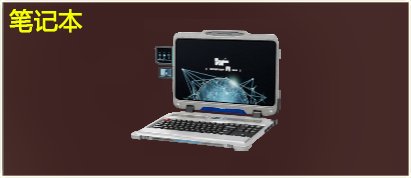
<style>
.page{position:relative;width:411px;height:178px}
.page>*{position:absolute;margin:0}
.t1{font:24px "MicrosoftYaHeiUI";color:#f4ff00;font-weight:bold}
</style>
<div class="page">
<p class="t1" style="left:9px;top:9px;width:74px;height:24px">笔记本</p>
</div>
